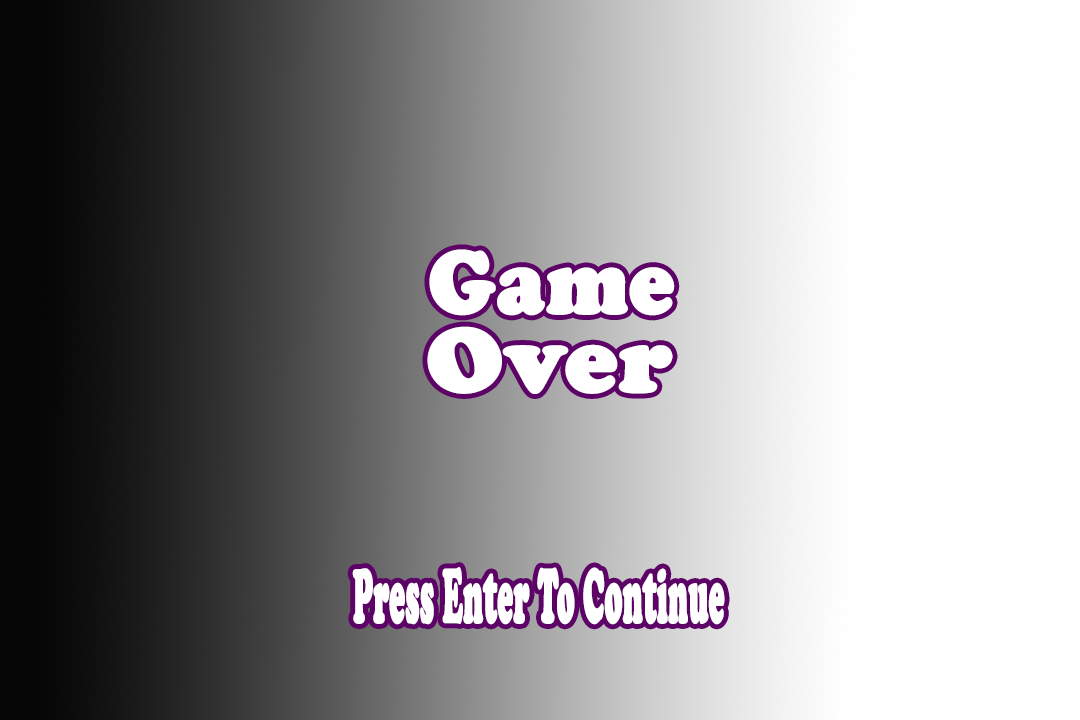
<style>
.page{position:relative;width:1080px;height:720px;background:#ffffff}
.page>*{position:absolute;margin:0}
.t1{font:91.8px "CooperBlack";color:#ffffff;font-weight:bold;scale:0.91 1}
.t2{font:93.6px "CooperBlack";color:#ffffff;font-weight:bold;scale:1.04 1}
.t3{font:78.9px "CooperBlack";color:#ffffff;font-weight:bold;scale:0.37 1}
</style>
<div class="page">
<p class="t1" style="left:429px;top:249px;width:246px;height:67px">Game</p>
<p class="t2" style="left:427px;top:326px;width:246px;height:68px">Over</p>
<p class="t3" style="left:352px;top:567px;width:373px;height:58px">Press Enter To Continue</p>
</div>
